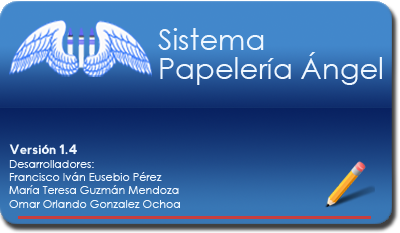
<style>
.page{position:relative;width:400px;height:233px}
.page>*{position:absolute;margin:0}
.t1{font:29px "CenturyGothic";color:#eff7ff}
.t2{font:13px "nevis-Bold";color:#eff7ff}
.t3{font:13px "MyriadPro-Bold";color:#eff7ff}
.t4{font:11px "CenturyGothic";color:#eff7ff}
</style>
<div class="page">
<p class="t1" style="left:158px;top:28px;width:106px;height:22px">Sistema</p>
<p class="t1" style="left:160px;top:52px;width:222px;height:33px">Papelería Ángel</p>
<p class="t2" style="left:9px;top:144px;width:68px;height:11px">Versi<span class="t3">ó</span>n 1.4</p>
<p class="t4" style="left:9px;top:160px;width:171px;height:48px">Desarrolladores:<br>Francisco Iván Eusebio Pérez<br>María Teresa Guzmán Mendoza<br>Omar Orlando Gonzalez Ochoa</p>
</div>
